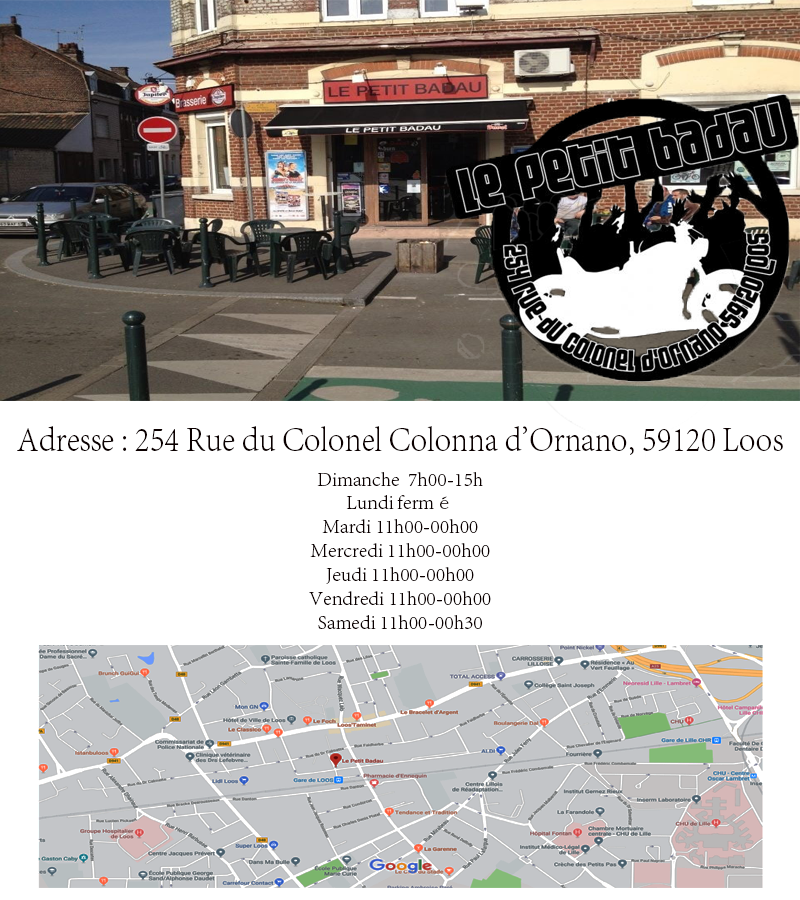
<style>
.page{position:relative;width:800px;height:900px;background:#ffffff}
.page>*{position:absolute;margin:0}
.t1{font:36.2px "AdobeSongStd-Light";color:#0b0000;scale:0.88 1}
.t2{font:20px "AdobeSongStd-Light";letter-spacing:0.005em;color:#0b0000}
</style>
<div class="page">
<p class="t1" style="left:17px;top:426px;width:766px;height:29px">Adresse : 254 Rue du Colonel Colonna d'Ornano, 59120 Loos</p>
<p class="t2" style="left:309px;top:472px;width:182px;height:157px;text-align:center">Dimanche  7h00-15h<br>Lundi fermé<br>Mardi 11h00-00h00<br>Mercredi 11h00-00h00<br>Jeudi 11h00-00h00<br>Vendredi 11h00-00h00<br>Samedi 11h00-00h30</p>
</div>
